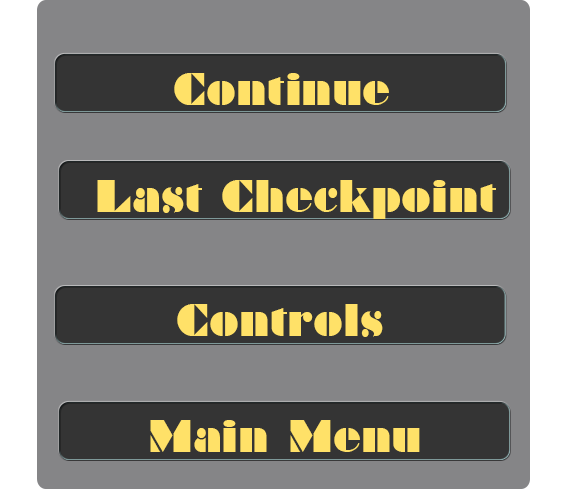
<style>
.page{position:relative;width:566px;height:489px;background:#858587}
.page>*{position:absolute;margin:0}
.t1{font:72.4px "Braggadocio";letter-spacing:0.01em;color:#ffe168;scale:0.9 1}
.t2{font:72.3px "Braggadocio";letter-spacing:0.01em;color:#ffe168;scale:0.9 1}
</style>
<div class="page">
<p class="t1" style="left:174px;top:73px;width:215px;height:32px">Continue</p>
<p class="t2" style="left:97px;top:180px;width:399px;height:39px">Last Checkpoint</p>
<p class="t2" style="left:177px;top:304px;width:206px;height:33px">Controls</p>
<p class="t1" style="left:150px;top:420px;width:270px;height:32px">Main Menu</p>
</div>
